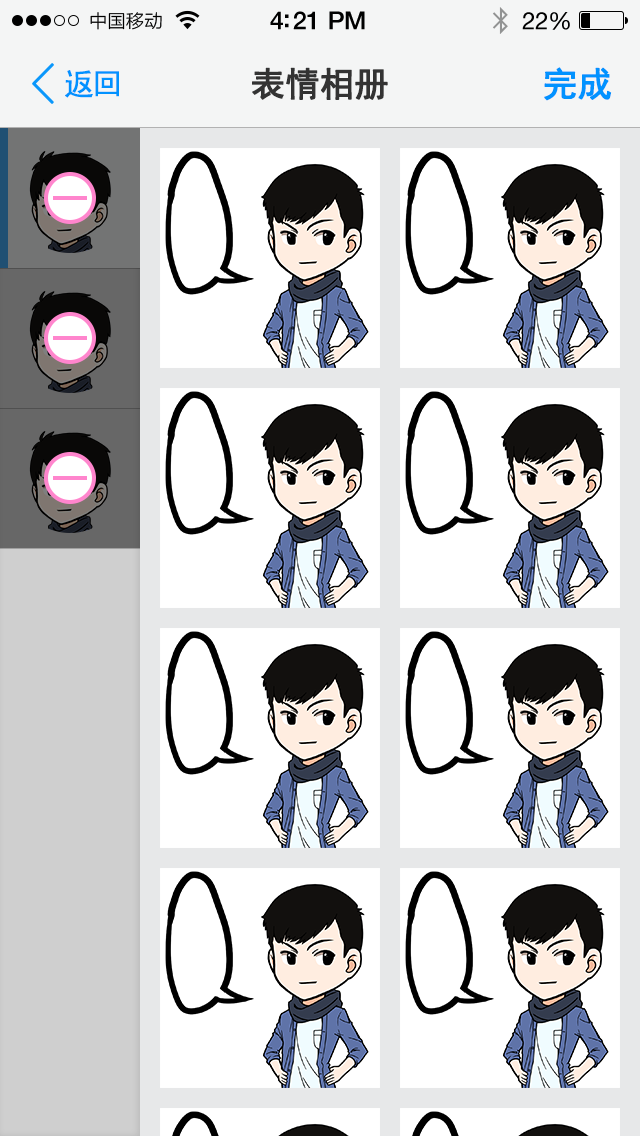
<style>
.page{position:relative;width:640px;height:1136px;background:#ffffff}
.page>*{position:absolute;margin:0}
.t1{font:30px "SimHei";letter-spacing:-0.075em;color:#0192ff;font-weight:bold}
.t2{font:34px "SimHei";letter-spacing:-0.01em;color:#333333;font-weight:bold}
.t3{font:34px "SimHei";letter-spacing:-0.01em;color:#0192ff;font-weight:bold}
</style>
<div class="page">
<p class="t1" style="left:65px;top:70px;width:54px;height:28px">返回</p>
<p class="t2" style="left:252px;top:67px;width:136px;height:33px">表情相册</p>
<p class="t3" style="left:544px;top:67px;width:68px;height:34px">完成</p>
</div>
